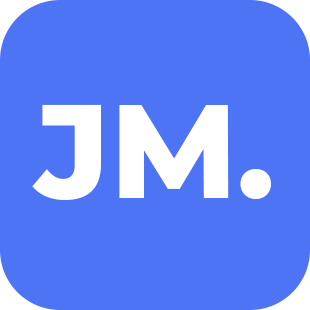
<style>
.page{position:relative;width:310px;height:310px;background:#4d74f5}
.page>*{position:absolute;margin:0}
.t1{font:133.3px "Montserrat-ExtraBold";color:#ffffff}
</style>
<div class="page">
<p class="t1" style="left:32px;top:104px;width:239px;height:96px">JM.</p>
</div>
